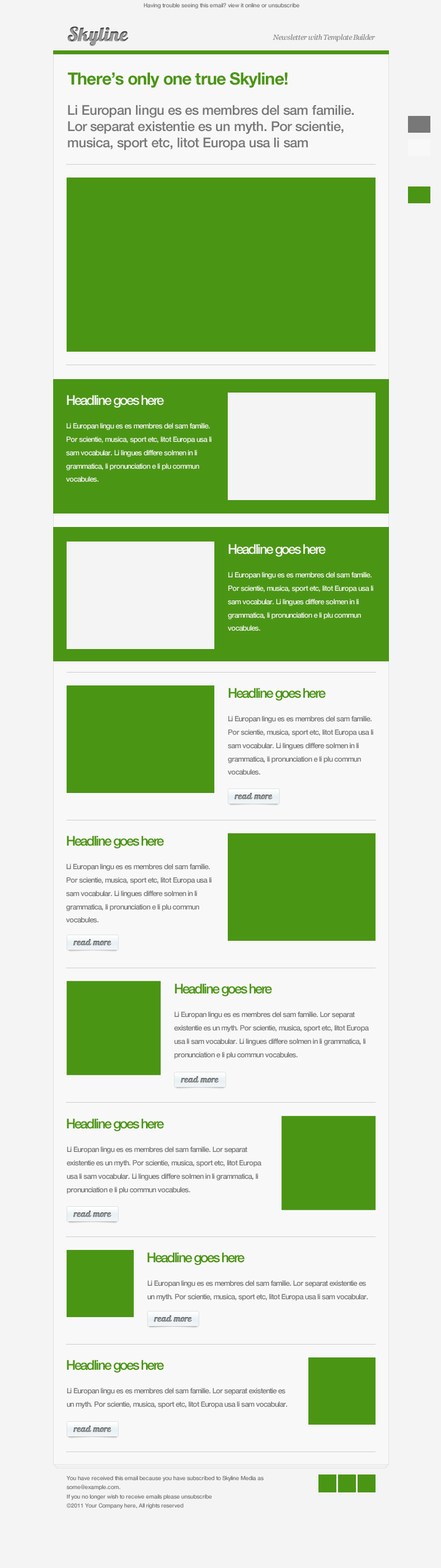
<style>
.page{position:relative;width:441px;height:1568px;background:#f4f4f4}
.page>*{position:absolute;margin:0}
.t1{font:5.6px "HelveticaNeueLTPro-Md";letter-spacing:-0.021em;color:#787878}
.t2{font:19px "Lobster1.4";color:#999999;font-weight:bold}
.t3{font:7.3px "Georgia-Italic";letter-spacing:-0.04em;color:#787878}
.t4{font:16.8px "HelveticaNeueLTPro-Bd";letter-spacing:-0.03em;color:#4b9515}
.t5{font:13.4px/16.1px "HelveticaNeueLTPro-Md";letter-spacing:-0.02em;color:#787878}
.t6{font:13.4px "HelveticaNeueLTPro-Md";letter-spacing:-0.091em;color:#f4f4f4}
.t7{font:7.3px/13.3px "HelveticaNeueLTPro-Md";letter-spacing:-0.052em;color:#f4f4f4}
.t8{font:13.4px "HelveticaNeueLTPro-Md";letter-spacing:-0.091em;color:#4b9515}
.t9{font:7.3px/13.3px "HelveticaNeueLTPro-Md";letter-spacing:-0.052em;color:#787878}
.t10{font:5.6px/9.1px "HelveticaNeueLTPro-Md";letter-spacing:-0.028em;color:#787878}
</style>
<div class="page">
<p class="t1" style="left:144px;top:3px;width:156px;height:6px">Having trouble seeing this email? view it online or unsubscribe</p>
<p class="t2" style="left:68px;top:26px;width:61px;height:20px">Skyline</p>
<p class="t3" style="left:273px;top:34px;width:102px;height:7px">Newsletter with Template Builder</p>
<p class="t4" style="left:68px;top:72px;width:220px;height:16px">There’s only one true Skyline!</p>
<p class="t5" style="left:68px;top:105px;width:286px;height:45px">Li Europan lingu es es membres del sam familie. Lor separat existentie es un myth. Por scientie, musica, sport etc, litot Europa usa li sam</p>
<p class="t6" style="left:67px;top:395px;width:97px;height:13px">Headline goes here</p>
<p class="t7" style="left:66px;top:423px;width:146px;height:59px">Li Europan lingu es es membres del sam familie. Por scientie, musica, sport etc, litot Europa usa li sam vocabular. Li lingues differe solmen in li grammatica, li pronunciation e li plu commun vocabules.</p>
<p class="t6" style="left:228px;top:544px;width:98px;height:13px">Headline goes here</p>
<p class="t7" style="left:228px;top:572px;width:146px;height:59px">Li Europan lingu es es membres del sam familie. Por scientie, musica, sport etc, litot Europa usa li sam vocabular. Li lingues differe solmen in li grammatica, li pronunciation e li plu commun vocabules.</p>
<p class="t8" style="left:228px;top:688px;width:98px;height:13px">Headline goes here</p>
<p class="t9" style="left:228px;top:716px;width:146px;height:59px">Li Europan lingu es es membres del sam familie. Por scientie, musica, sport etc, litot Europa usa li sam vocabular. Li lingues differe solmen in li grammatica, li pronunciation e li plu commun vocabules.</p>
<p class="t8" style="left:67px;top:836px;width:97px;height:12px">Headline goes here</p>
<p class="t9" style="left:66px;top:864px;width:146px;height:59px">Li Europan lingu es es membres del sam familie. Por scientie, musica, sport etc, litot Europa usa li sam vocabular. Li lingues differe solmen in li grammatica, li pronunciation e li plu commun vocabules.</p>
<p class="t8" style="left:175px;top:983px;width:97px;height:13px">Headline goes here</p>
<p class="t9" style="left:174px;top:1011px;width:195px;height:48px">Li Europan lingu es es membres del sam familie. Lor separat existentie es un myth. Por scientie, musica, sport etc, litot Europa usa li sam vocabular. Li lingues differe solmen in li grammatica, li pronunciation e li plu commun vocabules.</p>
<p class="t8" style="left:67px;top:1118px;width:97px;height:13px">Headline goes here</p>
<p class="t9" style="left:67px;top:1146px;width:195px;height:48px">Li Europan lingu es es membres del sam familie. Lor separat existentie es un myth. Por scientie, musica, sport etc, litot Europa usa li sam vocabular. Li lingues differe solmen in li grammatica, li pronunciation e li plu commun vocabules.</p>
<p class="t8" style="left:147px;top:1252px;width:98px;height:13px">Headline goes here</p>
<p class="t9" style="left:147px;top:1280px;width:221px;height:21px">Li Europan lingu es es membres del sam familie. Lor separat existentie es un myth. Por scientie, musica, sport etc, litot Europa usa li sam vocabular.</p>
<p class="t8" style="left:67px;top:1360px;width:97px;height:13px">Headline goes here</p>
<p class="t9" style="left:67px;top:1388px;width:220px;height:20px">Li Europan lingu es es membres del sam familie. Lor separat existentie es un myth. Por scientie, musica, sport etc, litot Europa usa li sam vocabular.</p>
<p class="t10" style="left:66px;top:1476px;width:198px;height:33px">You have received this email because you have subscribed to Skyline Media as some@example.com.<br>If you no longer wish to receive emails please unsubscribe<br>©2011 Your Company here, All rights reserved</p>
</div>
